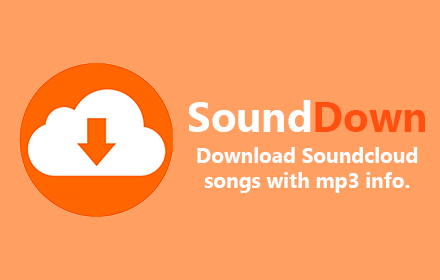
<style>
.page{position:relative;width:440px;height:280px;background:#ff9f62}
.page>*{position:absolute;margin:0}
.t1{font:20.8px "MicrosoftTaiLe-Bold";color:#ffffff}
</style>
<div class="page">
<p class="t1" style="left:197px;top:147px;width:221px;height:46px;text-align:center">Download Soundcloud songs with mp3 info.</p>
</div>
